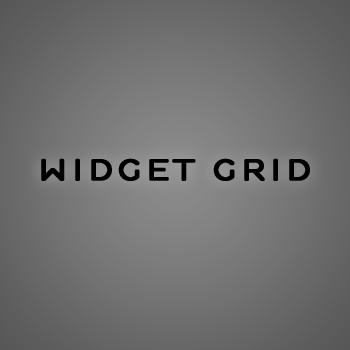
<style>
.page{position:relative;width:350px;height:350px}
.page>*{position:absolute;margin:0}
.t1{font:62px "Estilo";letter-spacing:-0.02em;color:#000000;font-weight:bold}
</style>
<div class="page">
<p class="t1" style="left:41px;top:158px;width:269px;height:23px">widget grid</p>
</div>
